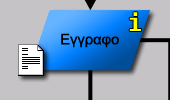
<style>
.page{position:relative;width:170px;height:100px;background:#c6c3c6}
.page>*{position:absolute;margin:0}
.t1{font:14.7px "ArialMT";color:#000000}
</style>
<div class="page">
<p class="t1" style="left:61px;top:33px;width:58px;height:15px">Εγγραφο</p>
</div>
